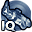
<style>
.page{position:relative;width:32px;height:32px}
.page>*{position:absolute;margin:0}
.t1{font:12px "MicrosoftYaHeiUI-Bold";color:#ffffff}
</style>
<div class="page">
<p class="t1" style="left:2px;top:21px;width:14px;height:10px">IQ</p>
</div>
